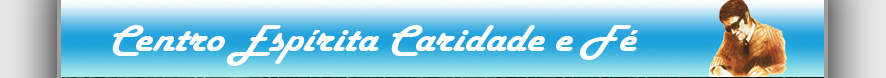
<style>
.page{position:relative;width:886px;height:78px}
.page>*{position:absolute;margin:0}
.t1{font:39px "HarlowSolid";color:#ffffff;font-style:italic;scale:1.12 1}
</style>
<div class="page">
<p class="t1" style="left:112px;top:25px;width:526px;height:41px">Centro Espírita Caridade e Fé</p>
</div>
